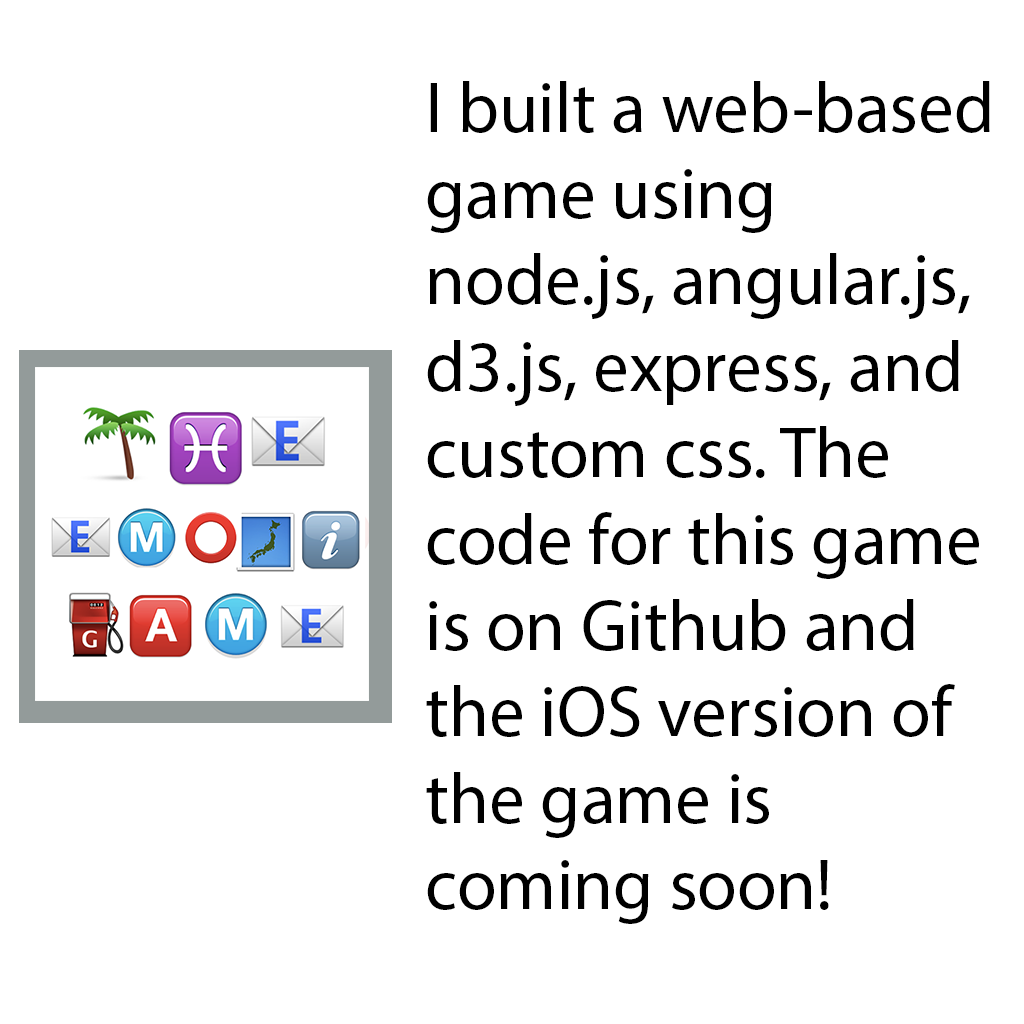
<style>
.page{position:relative;width:1024px;height:1024px;background:#ffffff}
.page>*{position:absolute;margin:0}
.t1{font:72px "MyriadPro-Regular";color:#000000}
</style>
<div class="page">
<p class="t1" style="left:426px;top:81px;width:564px;height:843px">I built a web-based game using node.js, angular.js, d3.js, express, and custom css. The code for this game is on Github and the iOS version of the game is coming soon!</p>
</div>
